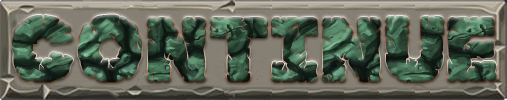
<style>
.page{position:relative;width:507px;height:100px}
.page>*{position:absolute;margin:0}
.t1{font:80px "JFRockSolid"}
</style>
<div class="page">
<p class="t1" style="left:11px;top:14px;width:486px;height:68px">Continue</p>
</div>
